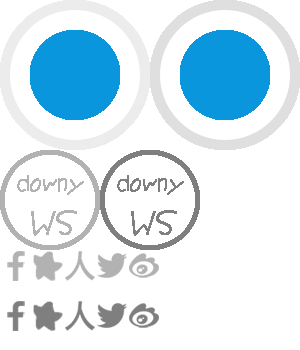
<style>
.page{position:relative;width:300px;height:350px;background:#ffffff}
.page>*{position:absolute;margin:0}
.t1{font:24px "JYaYa";color:#b2b2b2;font-weight:bold;font-style:italic;scale:0.9 1}
.t2{font:24px "JYaYa";color:#7f7f7f;font-weight:bold;font-style:italic;scale:0.9 1}
.t3{font:36px "JYaYa";color:#b2b2b2;font-weight:bold;font-style:italic;scale:0.9 1}
.t4{font:36px "JYaYa";color:#7f7f7f;font-weight:bold;font-style:italic;scale:0.9 1}
</style>
<div class="page">
<p class="t1" style="left:17px;top:175px;width:67px;height:20px">downy</p>
<p class="t2" style="left:117px;top:175px;width:67px;height:20px">downy</p>
<p class="t3" style="left:31px;top:210px;width:46px;height:26px">WS</p>
<p class="t4" style="left:131px;top:210px;width:46px;height:26px">WS</p>
</div>
